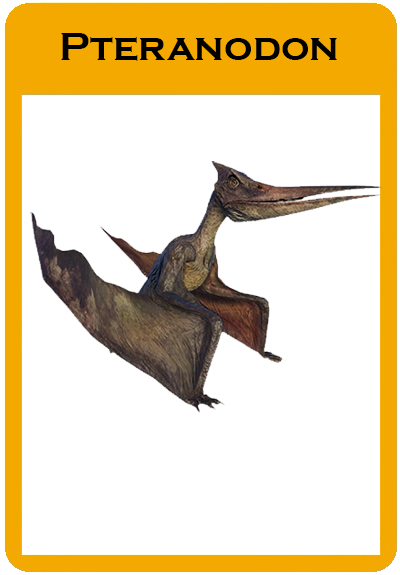
<style>
.page{position:relative;width:400px;height:575px;background:#ffffff}
.page>*{position:absolute;margin:0}
.t1{font:40px "CopperplateGothic-Bold";color:#000000}
</style>
<div class="page">
<p class="t1" style="left:61px;top:33px;width:276px;height:28px">Pteranodon</p>
</div>
